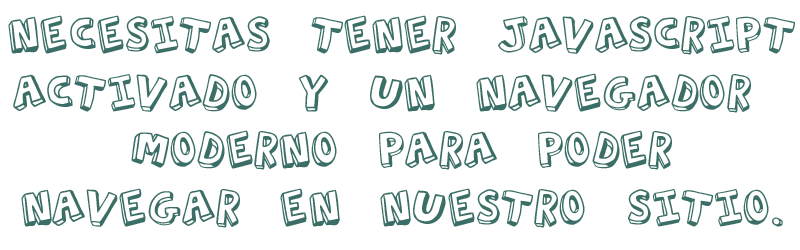
<style>
.page{position:relative;width:800px;height:250px;background:#ffffff}
.page>*{position:absolute;margin:0}
.t1{font:48px "ActionJackson";color:#3b6e67}
</style>
<div class="page">
<p class="t1" style="left:8px;top:15px;width:787px;height:213px;text-align:center">necesitas tener javascript<br>activado y un navegador <br>moderno para poder<br>navegar en nuestro sitio.</p>
</div>
